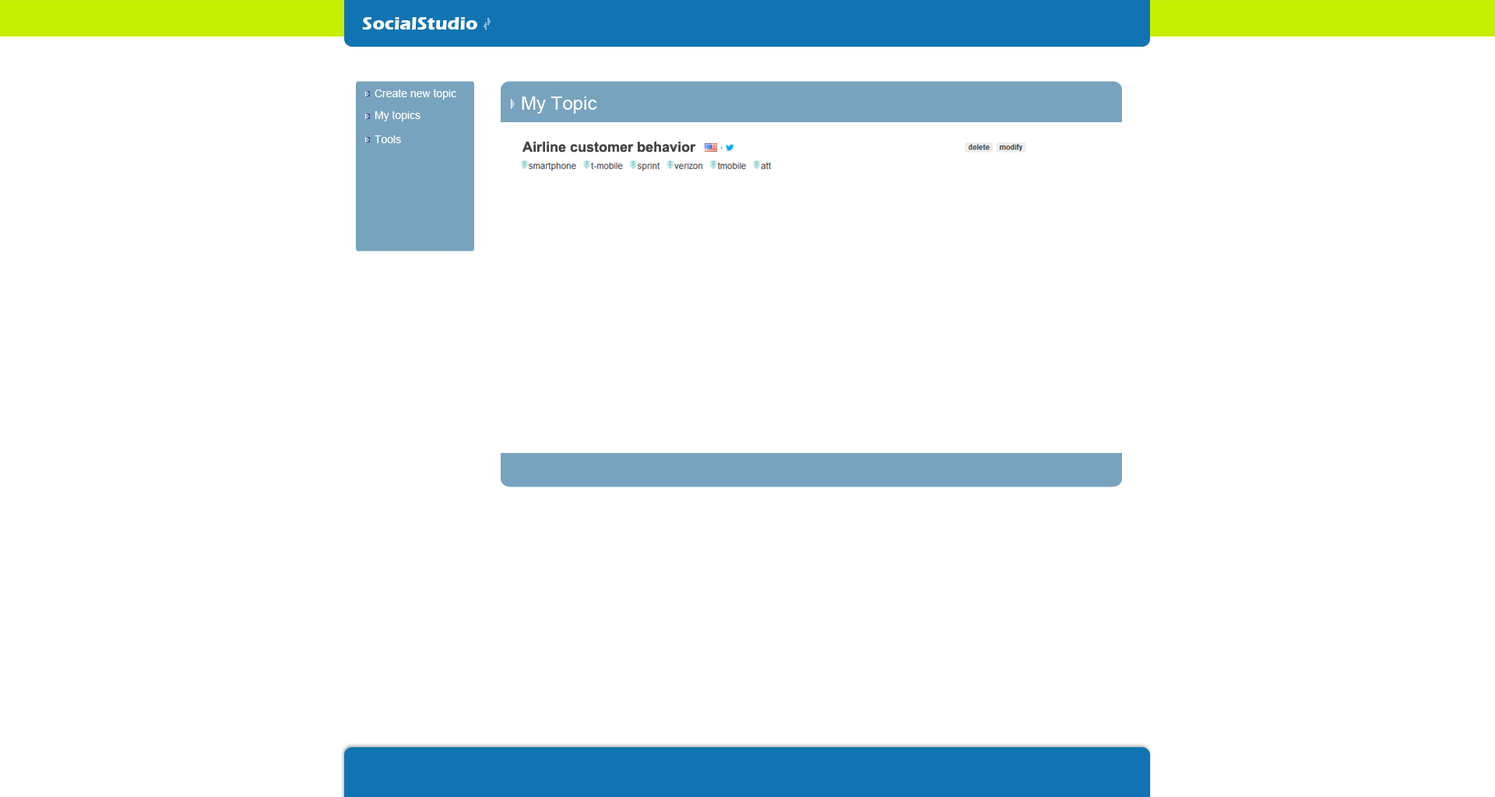
<style>
.page{position:relative;width:1495px;height:797px;background:#ffffff}
.page>*{position:absolute;margin:0}
.t1{font:18.7px "ErasITC-Bold";color:#ffffff}
.t2{font:10.9px "ArialMT";color:#ffffff}
.t3{font:18.7px "ArialMT";color:#ffffff}
.t4{font:14px "Arial-BoldMT";color:#434343}
.t5{font:9.3px "Arial-BoldMT";color:#78a3be}
</style>
<div class="page">
<p class="t1" style="left:362px;top:17px;width:115px;height:13px">SocialStudio</p>
<p class="t2" style="left:375px;top:89px;width:81px;height:11px">Create new topic</p>
<p class="t3" style="left:522px;top:97px;width:75px;height:17px">My Topic</p>
<p class="t2" style="left:375px;top:111px;width:46px;height:10px">My topics</p>
<p class="t2" style="left:375px;top:136px;width:26px;height:7px">Tools</p>
<p class="t4" style="left:523px;top:142px;width:173px;height:11px">Airline customer behavior</p>
<p class="t5" style="left:720px;top:147px;width:3px;height:2px">.</p>
</div>
